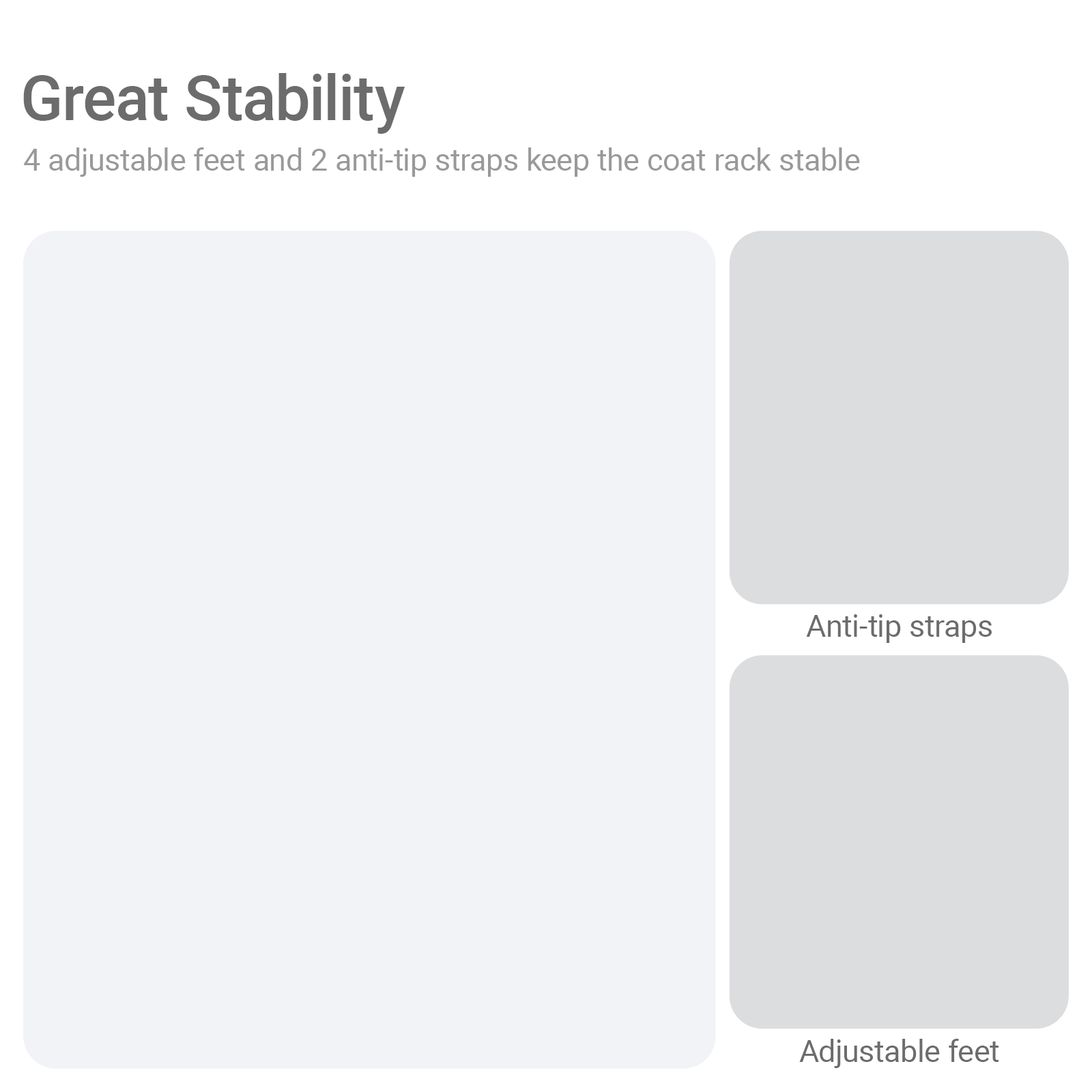
<style>
.page{position:relative;width:1092px;height:1092px;background:#f2f3f6}
.page>*{position:absolute;margin:0}
.t1{font:62.6px "Roboto-Medium";color:#6c6c6c}
.t2{font:30.6px "Roboto-Regular";color:#999999}
.t3{font:30.6px "Roboto-Regular";color:#6c6c6c}
</style>
<div class="page">
<p class="t1" style="left:23px;top:73px;width:382px;height:61px">Great Stability</p>
<p class="t2" style="left:24px;top:147px;width:836px;height:30px">4 adjustable feet and 2 anti-tip straps keep the coat rack stable</p>
<p class="t3" style="left:806px;top:614px;width:186px;height:29px">Anti-tip straps</p>
<p class="t3" style="left:799px;top:1039px;width:200px;height:29px">Adjustable feet</p>
</div>
